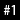
<style>
.page{position:relative;width:20px;height:20px;background:#000000}
.page>*{position:absolute;margin:0}
.t1{font:14px "MyriadPro-Regular";color:#ffffff}
</style>
<div class="page">
<p class="t1" style="left:3px;top:5px;width:12px;height:10px">#1</p>
</div>
